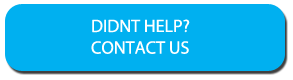
<style>
.page{position:relative;width:293px;height:80px;background:#00b0f0}
.page>*{position:absolute;margin:0}
.t1{font:18px "MyriadPro-Regular";color:#ffffff}
</style>
<div class="page">
<p class="t1" style="left:91px;top:19px;width:99px;height:35px">DIDNT HELP?<br>CONTACT US</p>
</div>
